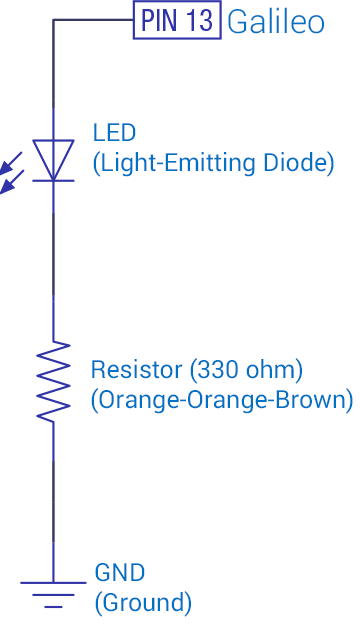
<style>
.page{position:relative;width:360px;height:625px;background:#ffffff}
.page>*{position:absolute;margin:0}
.t1{font:33.3px "Roboto-Light";color:#0171c5}
.t2{font:25px "Roboto-Regular";color:#0171c5}
</style>
<div class="page">
<p class="t1" style="left:228px;top:7px;width:97px;height:27px">Galileo</p>
<p class="t2" style="left:93px;top:123px;width:241px;height:54px">LED<br>(Light-Emitting Diode)</p>
<p class="t2" style="left:91px;top:358px;width:262px;height:56px">Resistor (330 ohm)<br>(Orange-Orange-Brown)</p>
<p class="t2" style="left:95px;top:563px;width:96px;height:54px">GND<br>(Ground)</p>
</div>
